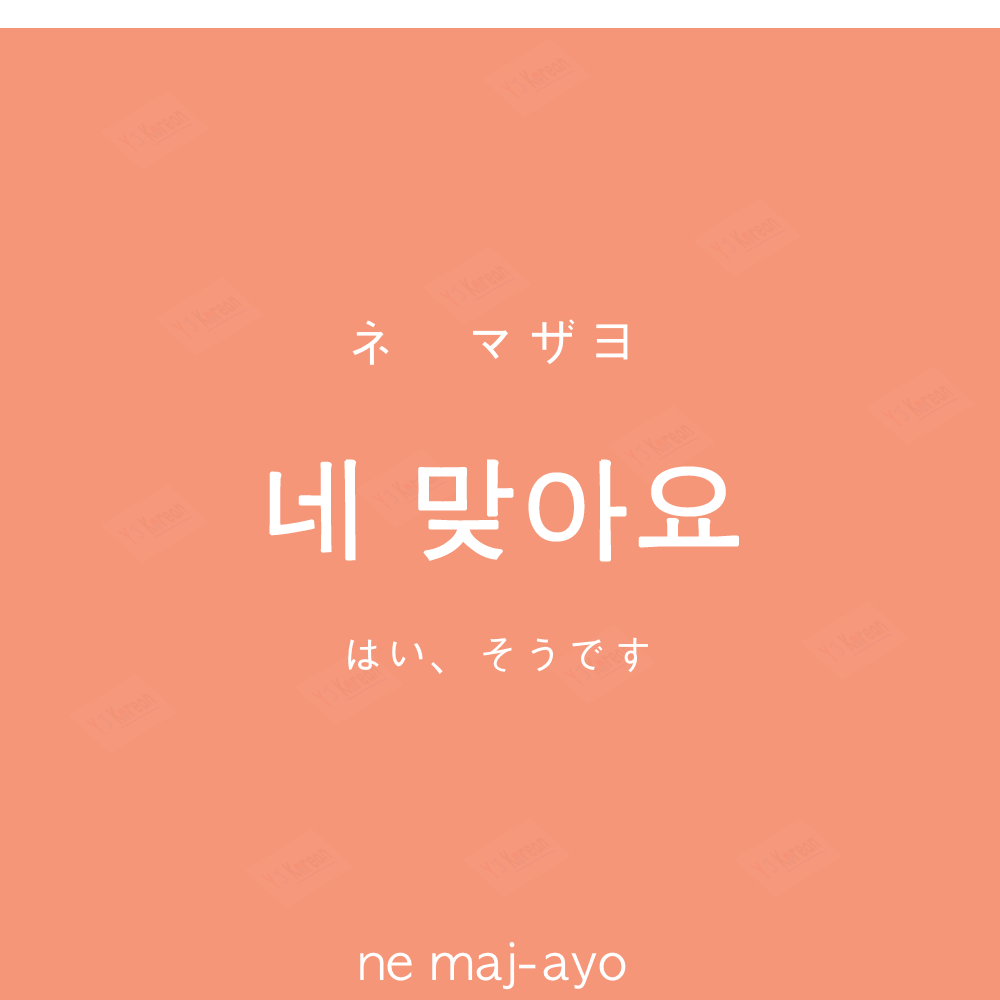
<style>
.page{position:relative;width:1000px;height:1000px;background:#f69679}
.page>*{position:absolute;margin:0}
.t1{font:60px "AppleGothic";color:#ffffff}
.t2{font:110px "AppleGothic";color:#ffffff;font-weight:bold}
.t3{font:45px "AppleGothic";color:#ffffff}
.t4{font:50px "AppleGothic";color:#ffffff}
</style>
<div class="page">
<p class="t1" style="left:352px;top:319px;width:276px;height:46px">ネ　マザヨ</p>
<p class="t2" style="left:269px;top:459px;width:470px;height:103px">네 맞아요</p>
<p class="t3" style="left:348px;top:637px;width:300px;height:37px">はい、そうです</p>
<p class="t4" style="left:360px;top:942px;width:266px;height:48px">ne maj-ayo</p>
</div>
